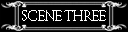
<style>
.page{position:relative;width:128px;height:32px;background:#000000}
.page>*{position:absolute;margin:0}
.t1{font:14px "TrajanPro-Regular";letter-spacing:-0.1em;color:#ffffff;scale:0.91 1}
</style>
<div class="page">
<p class="t1" style="left:22px;top:10px;width:84px;height:11px">SCENE THREE</p>
</div>
